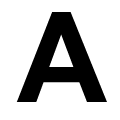
<style>
.page{position:relative;width:120px;height:120px;background:#ffffff}
.page>*{position:absolute;margin:0}
.t1{font:125px "Arial-BoldMT";color:#000000}
</style>
<div class="page">
<p class="t1" style="left:16px;top:12px;width:91px;height:90px">A</p>
</div>
